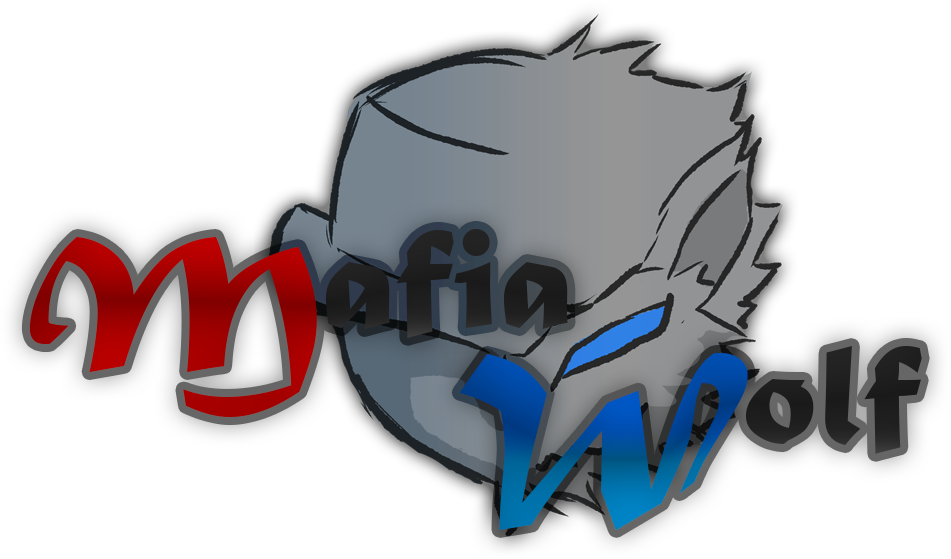
<style>
.page{position:relative;width:951px;height:559px;background:#ffffff}
.page>*{position:absolute;margin:0}
.t1{font:150px "MaturaMTScriptCapitals"}
.t2{font:200px "MaturaMTScriptCapitals"}
</style>
<div class="page">
<p class="t1" style="left:29px;top:229px;width:539px;height:188px"><span class="t2">M</span>afia</p>
<p class="t1" style="left:459px;top:346px;width:463px;height:184px"><span class="t2">W</span>olf</p>
</div>
